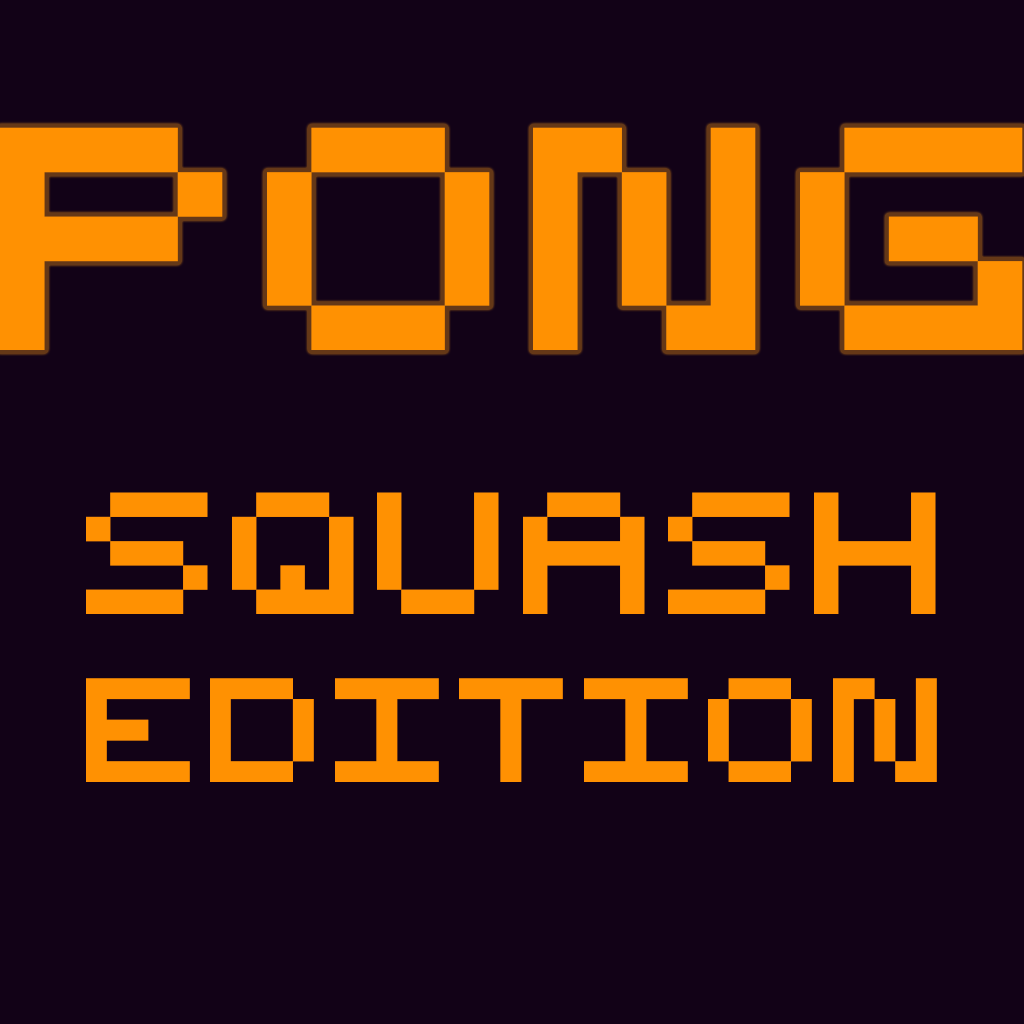
<style>
.page{position:relative;width:1024px;height:1024px;background:#120217}
.page>*{position:absolute;margin:0}
.t1{font:355.5px "Bit5x5";color:#ff9102}
.t2{font:194.1px "Bit5x5";color:#ff9102}
.t3{font:165.9px "Bit5x5";color:#ff9102}
</style>
<div class="page">
<p class="t1" style="left:0px;top:127px;width:1023px;height:223px">pong</p>
<p class="t2" style="left:86px;top:492px;width:850px;height:122px">squash</p>
<p class="t3" style="left:86px;top:678px;width:851px;height:104px">Edition</p>
</div>
